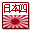
<style>
.page{position:relative;width:33px;height:32px;background:#ffffff}
.page>*{position:absolute;margin:0}
.t1{font:10.4px "SimSun";letter-spacing:-0.25em;color:#ae0012}
</style>
<div class="page">
<p class="t1" style="left:4px;top:4px;width:23px;height:9px">日本四</p>
</div>
